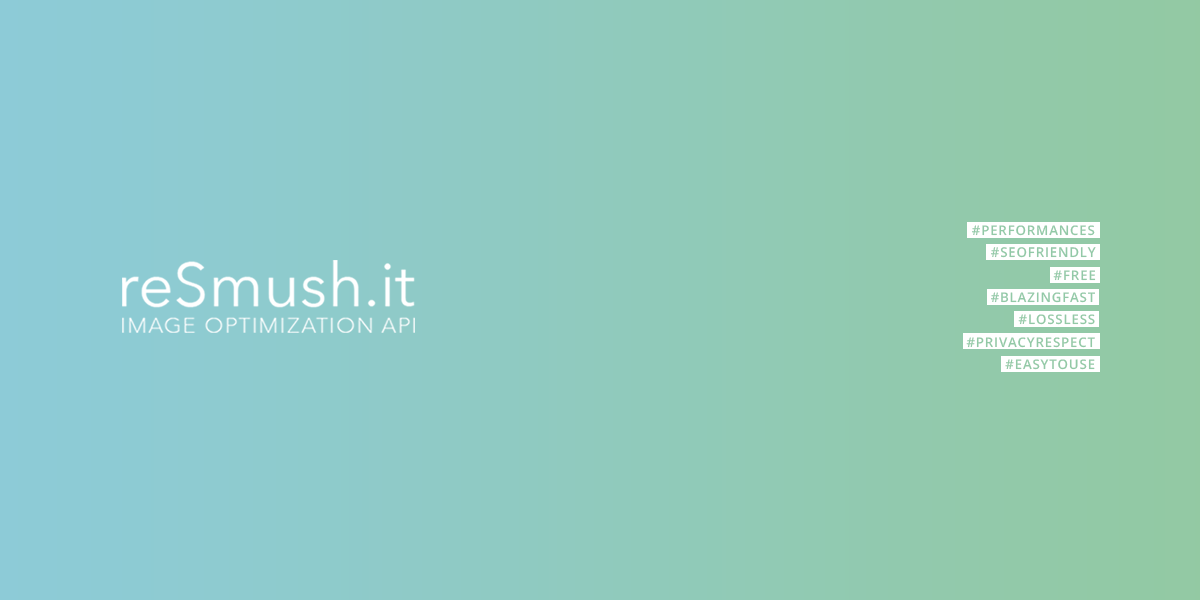
<style>
.page{position:relative;width:1200px;height:600px}
.page>*{position:absolute;margin:0}
.t1{font:13.3px "OpenSans-SemiBold";letter-spacing:0.06em;color:#92c9a7}
.t2{font:13.5px "OpenSans-SemiBold";letter-spacing:0.06em;color:#92c9a7}
.t3{font:13.3px "OpenSans-SemiBold";letter-spacing:0.06em;color:#92c9a6}
</style>
<div class="page">
<p class="t1" style="left:972px;top:225px;width:123px;height:11px">#PERFORMANCES</p>
<p class="t2" style="left:991px;top:247px;width:105px;height:11px">#SEOFRIENDLY</p>
<p class="t1" style="left:1053px;top:270px;width:43px;height:11px">#FREE</p>
<p class="t3" style="left:991px;top:292px;width:104px;height:11px">#BLAZINGFAST</p>
<p class="t3" style="left:1018px;top:314px;width:77px;height:11px">#LOSSLESS</p>
<p class="t3" style="left:966px;top:337px;width:129px;height:11px">#PRIVACYRESPECT</p>
<p class="t3" style="left:1005px;top:359px;width:90px;height:11px">#EASYTOUSE</p>
</div>
